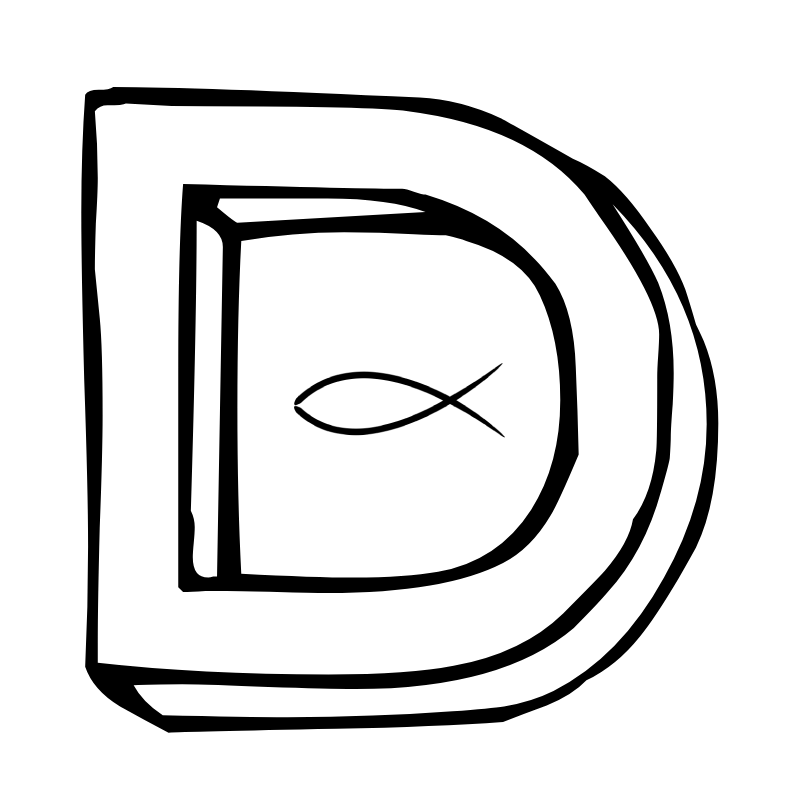
<style>
.page{position:relative;width:800px;height:800px;background:#ffffff}
.page>*{position:absolute;margin:0}
.t1{font:969.6px "NeoRetroDraw";color:#000000}
</style>
<div class="page">
<p class="t1" style="left:81px;top:86px;width:638px;height:647px">D</p>
</div>
